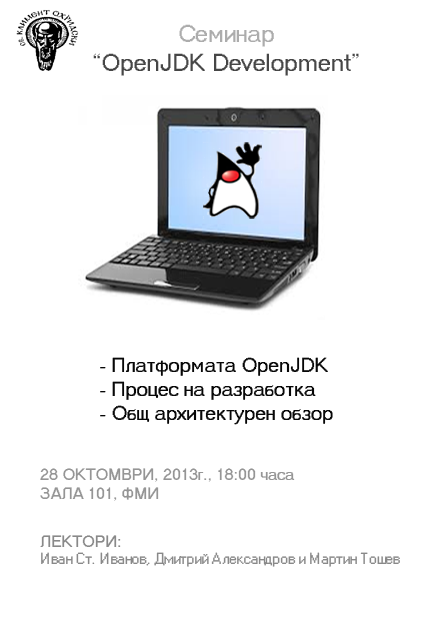
<style>
.page{position:relative;width:436px;height:625px;background:#ffffff}
.page>*{position:absolute;margin:0}
.t1{font:24px "MS Sans Serif";color:#464646}
.t2{font:24px "MS Sans Serif";color:#363636}
.t3{font:24px "MS Sans Serif";color:#acacac}
.t4{font:20px "MS Sans Serif";color:#070707}
.t5{font:14px "MS Sans Serif";color:#898989}
.t6{font:16px "MS Sans Serif";color:#959595}
.t7{font:16px "MS Sans Serif";color:#898989}
</style>
<div class="page">
<p class="t1" style="left:93px;top:24px;width:266px;height:52px;text-align:center"><span class="t2"><br></span><span class="t3">Семинар<br></span>“ОpenJDK Development”</p>
<p class="t4" style="left:100px;top:357px;width:233px;height:68px">- Платформата OpenJDK<br>- Процес на разработка<br>- Общ архитектурен обзор</p>
<p class="t5" style="left:40px;top:468px;width:360px;height:99px"><span class="t6">28 ОКТОМВРИ, 2013г., 18:00 часа<br>ЗАЛА 101, ФМИ<br><br></span><span class="t7">ЛЕКТОРИ:  <br></span>Иван Ст. Иванов, Дмитрий Александров и Мартин Тошев</p>
</div>
